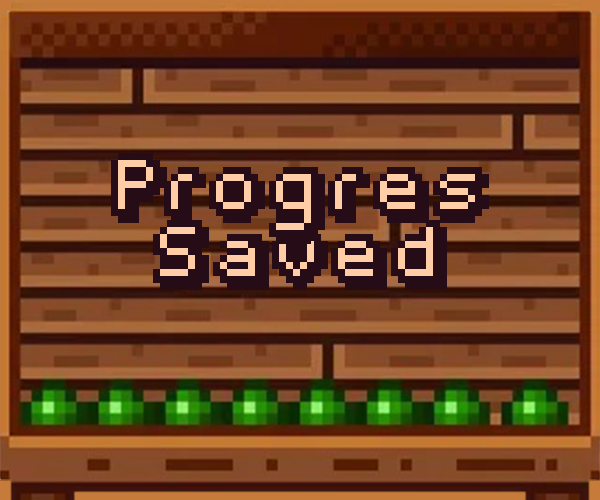
<style>
.page{position:relative;width:600px;height:500px}
.page>*{position:absolute;margin:0}
.t1{font:56px "Fipps-Regular";letter-spacing:0.06em;color:#250c16}
</style>
<div class="page">
<p class="t1" style="left:111px;top:153px;width:378px;height:137px;text-align:center">Progres<br>Saved</p>
</div>
